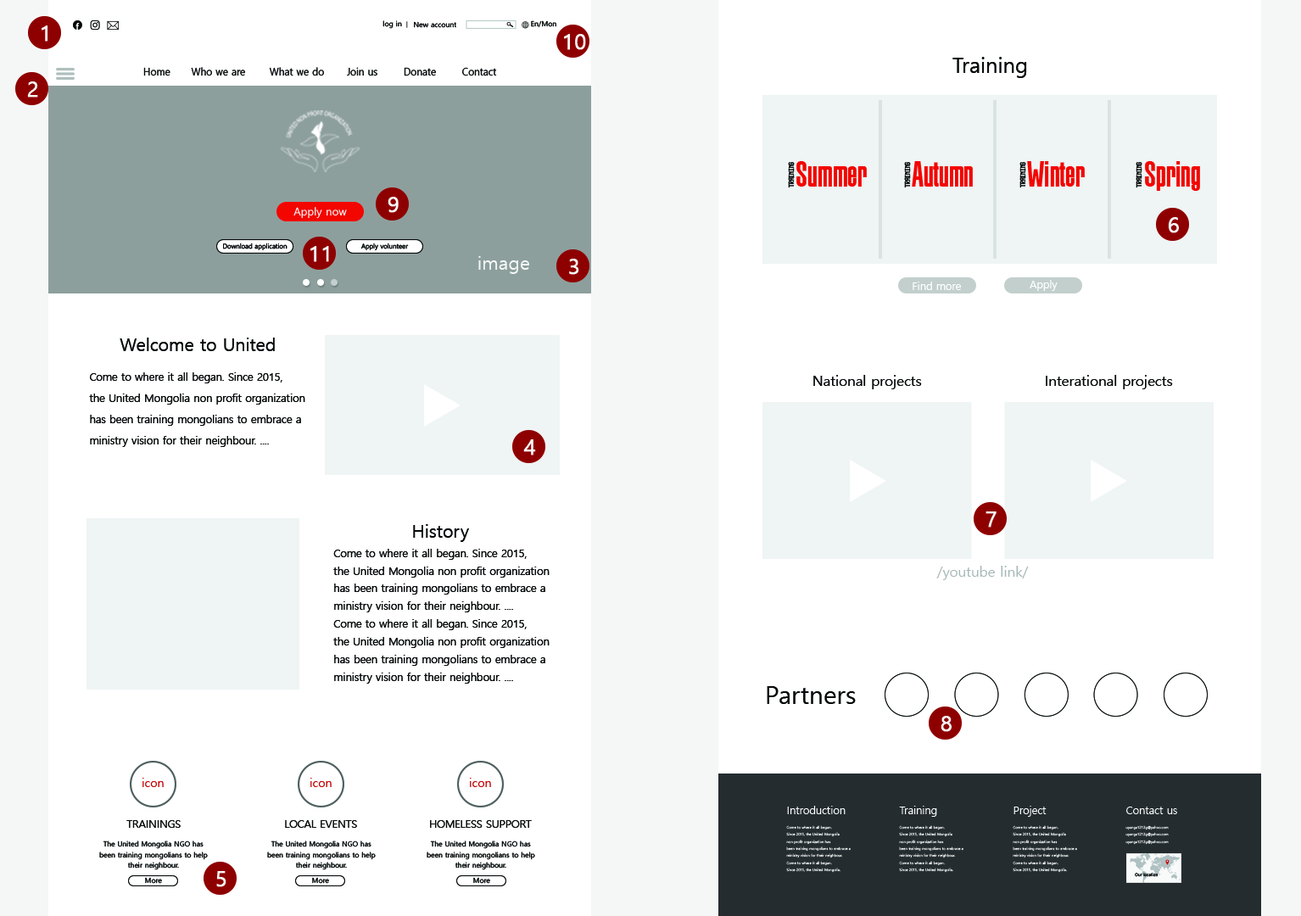
<style>
.page{position:relative;width:1301px;height:916px;background:#ffffff}
.page>*{position:absolute;margin:0}
.t1{font:21.2px "MalgunGothic";color:#f5f7f7;font-weight:bold}
.t2{font:7.1px "MalgunGothic";color:#060808}
.t3{font:21.2px "MalgunGothic";color:#060808}
.t4{font:10.3px "MalgunGothic";color:#060808;scale:0.95 1}
.t5{font:35.3px "MogulKekur";color:#f30500}
.t6{font:6.8px "MogulLCDNova";color:#060808;text-transform:uppercase;scale:0.88 1}
.t7{font:10.6px "MalgunGothic";color:#ffffff}
.t8{font:6.7px "MalgunGothic";color:#060808}
.t9{font:6.7px "MalgunGothic";color:#060808;text-transform:uppercase}
.t10{font:19px "MalgunGothic";color:#f5f7f7}
.t11{font:17.7px "MalgunGothic";color:#060808}
.t12{font:10.6px/21.2px "MalgunGothic";color:#060808}
.t13{font:14.1px "MalgunGothic";color:#060808}
.t14{font:10.6px/17.7px "MalgunGothic";color:#060808}
.t15{font:14.1px "MalgunGothic";color:#a6b8b7}
.t16{font:24.7px "MalgunGothic";color:#060808}
.t17{font:11.9px "MalgunGothic";color:#c30000}
.t18{font:3.5px/7.1px "MalgunGothic";color:#ffffff}
.t19{font:10.6px/63.6px "MalgunGothic";color:#ffffff}
.t20{font:3.5px/14.1px "MalgunGothic";color:#ffffff}
.t21{font:10.6px "MalgunGothic";color:#060808;text-transform:uppercase}
.t22{font:7.1px/10.6px "MalgunGothic";color:#060808}
.t23{font:4.2px "MalgunGothic";color:#060808;scale:0.96 1}
</style>
<div class="page">
<p class="t1" style="left:42px;top:25px;width:6px;height:17px">1</p>
<p class="t2" style="left:383px;top:20px;width:19px;height:9px">log in</p>
<p class="t2" style="left:414px;top:21px;width:42px;height:7px">New account</p>
<p class="t2" style="left:531px;top:20px;width:26px;height:8px">En/Mon</p>
<p class="t1" style="left:564px;top:34px;width:22px;height:16px">10</p>
<p class="t3" style="left:953px;top:57px;width:74px;height:21px">Training</p>
<p class="t4" style="left:143px;top:67px;width:28px;height:9px">Home</p>
<p class="t4" style="left:191px;top:67px;width:54px;height:9px">Who we are</p>
<p class="t4" style="left:269px;top:67px;width:55px;height:9px">What we do</p>
<p class="t4" style="left:347px;top:67px;width:31px;height:9px">Join us</p>
<p class="t4" style="left:404px;top:67px;width:32px;height:9px">Donate</p>
<p class="t4" style="left:462px;top:67px;width:35px;height:9px">Contact</p>
<p class="t1" style="left:27px;top:81px;width:11px;height:17px">2</p>
<p class="t5" style="left:797px;top:161px;width:70px;height:26px">Summer</p>
<p class="t5" style="left:912px;top:161px;width:61px;height:26px">Autumn</p>
<p class="t5" style="left:1027px;top:161px;width:58px;height:26px">Winter</p>
<p class="t5" style="left:1145px;top:161px;width:55px;height:30px">Spring</p>
<p class="t6" style="left:788px;top:162px;width:7px;height:26px;rotate:-90deg">training</p>
<p class="t6" style="left:904px;top:162px;width:7px;height:26px;rotate:-90deg">training</p>
<p class="t6" style="left:1020px;top:162px;width:7px;height:26px;rotate:-90deg">training</p>
<p class="t6" style="left:1136px;top:162px;width:7px;height:26px;rotate:-90deg">training</p>
<p class="t1" style="left:388px;top:197px;width:11px;height:16px">9</p>
<p class="t7" style="left:294px;top:207px;width:53px;height:12px">Apply now</p>
<p class="t1" style="left:1168px;top:217px;width:11px;height:16px">6</p>
<p class="t8" style="left:223px;top:243px;width:65px;height:7px"><span class="t9">D</span>ownload application</p>
<p class="t8" style="left:361px;top:243px;width:48px;height:7px">Apply volunteer</p>
<p class="t1" style="left:311px;top:246px;width:18px;height:16px">11</p>
<p class="t10" style="left:478px;top:256px;width:51px;height:18px">image</p>
<p class="t1" style="left:569px;top:259px;width:10px;height:16px">3</p>
<p class="t7" style="left:913px;top:282px;width:48px;height:8px">Find more</p>
<p class="t7" style="left:1030px;top:280px;width:28px;height:11px">Apply</p>
<p class="t11" style="left:120px;top:338px;width:155px;height:13px">Welcome to United</p>
<p class="t12" style="left:89px;top:372px;width:216px;height:75px">Come to where it all began. Since 2015,<br>the United Mongolia non profit organization<br>has been training mongolians to embrace a<br>ministry vision for their neighbour. ....</p>
<p class="t13" style="left:814px;top:375px;width:108px;height:14px">National projects</p>
<p class="t13" style="left:1046px;top:375px;width:127px;height:14px">Interational projects</p>
<p class="t1" style="left:523px;top:439px;width:13px;height:17px">4</p>
<p class="t1" style="left:986px;top:512px;width:11px;height:16px">7</p>
<p class="t11" style="left:413px;top:524px;width:56px;height:18px">History</p>
<p class="t14" style="left:333px;top:549px;width:217px;height:135px">Come to where it all began. Since 2015,<br>the United Mongolia non profit organization<br>has been training mongolians to embrace a<br>ministry vision for their neighbour. ....<br>Come to where it all began. Since 2015,<br>the United Mongolia non profit organization<br>has been training mongolians to embrace a<br>ministry vision for their neighbour. ....</p>
<p class="t15" style="left:937px;top:566px;width:92px;height:14px">/youtube link/</p>
<p class="t16" style="left:767px;top:686px;width:89px;height:18px">Partners</p>
<p class="t1" style="left:941px;top:716px;width:11px;height:16px">8</p>
<p class="t17" style="left:143px;top:778px;width:21px;height:9px">icon</p>
<p class="t17" style="left:311px;top:778px;width:21px;height:9px">icon</p>
<p class="t17" style="left:470px;top:778px;width:21px;height:9px">icon</p>
<p class="t18" style="left:786px;top:806px;width:65px;height:67px"><span class="t19">Introduction<br></span><span class="t20">Come to where it all began.<br></span>Since 2015, the United Mongolia<br>non profit organization has<br>been training mongolians to embrace a<br>ministry vision for their neighbour.<br>Come to where it all began.<br>Since 2015, the United Mongolia.</p>
<p class="t18" style="left:899px;top:806px;width:65px;height:67px"><span class="t19">Training<br></span><span class="t20">Come to where it all began.<br></span>Since 2015, the United Mongolia<br>non profit organization has<br>been training mongolians to embrace a<br>ministry vision for their neighbour.<br>Come to where it all began.<br>Since 2015, the United Mongolia.</p>
<p class="t18" style="left:1013px;top:806px;width:64px;height:67px"><span class="t19">Project<br></span><span class="t20">Come to where it all began.<br></span>Since 2015, the United Mongolia<br>non profit organization has<br>been training mongolians to embrace a<br>ministry vision for their neighbour.<br>Come to where it all began.<br>Since 2015, the United Mongolia.</p>
<p class="t18" style="left:1126px;top:807px;width:52px;height:38px"><span class="t19">Contact us<br></span><span class="t20">uyanga1212g@yahoo.com<br></span>uyanga1212g@yahoo.com<br>uyanga1212g@yahoo.com</p>
<p class="t21" style="left:126px;top:820px;width:55px;height:8px">Trainings</p>
<p class="t21" style="left:285px;top:820px;width:72px;height:8px">local events</p>
<p class="t21" style="left:430px;top:820px;width:102px;height:8px">homeless support</p>
<p class="t22" style="left:99px;top:841px;width:109px;height:29px;text-align:center">The United Mongolia NGO has<br>been training mongolians to help<br>their neighbour.</p>
<p class="t22" style="left:267px;top:841px;width:109px;height:29px;text-align:center">The United Mongolia NGO has<br>been training mongolians to help<br>their neighbour.</p>
<p class="t22" style="left:427px;top:841px;width:108px;height:29px;text-align:center">The United Mongolia NGO has<br>been training mongolians to help<br>their neighbour.</p>
<p class="t2" style="left:145px;top:877px;width:17px;height:7px">More</p>
<p class="t1" style="left:216px;top:871px;width:11px;height:16px">5</p>
<p class="t2" style="left:312px;top:877px;width:17px;height:7px">More</p>
<p class="t2" style="left:473px;top:877px;width:17px;height:7px">More</p>
<p class="t23" style="left:1135px;top:873px;width:23px;height:4px">Our location</p>
</div>
